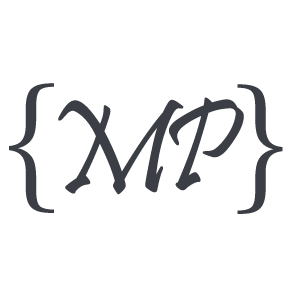
<style>
.page{position:relative;width:300px;height:300px;background:#ffffff}
.page>*{position:absolute;margin:0}
.t1{font:152.9px "Harrington";color:#3b3e44}
.t2{font:133.1px "Pristina-Regular";color:#3b3e44}
</style>
<div class="page">
<p class="t1" style="left:9px;top:83px;width:45px;height:130px">{</p>
<p class="t1" style="left:237px;top:84px;width:46px;height:130px">}</p>
<p class="t2" style="left:58px;top:99px;width:126px;height:96px">M</p>
<p class="t2" style="left:169px;top:97px;width:75px;height:94px">P</p>
</div>
